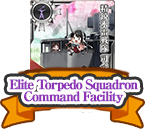
<style>
.page{position:relative;width:145px;height:129px;background:#ffffff}
.page>*{position:absolute;margin:0}
.t1{font:13px/12px "RyuminPro-ExBold";letter-spacing:-0.1em;color:#8d34b9;font-weight:bold}
</style>
<div class="page">
<p class="t1" style="left:9px;top:79px;width:129px;height:25px;text-align:center">Elite Torpedo Squadron<br>Command Facility</p>
</div>
